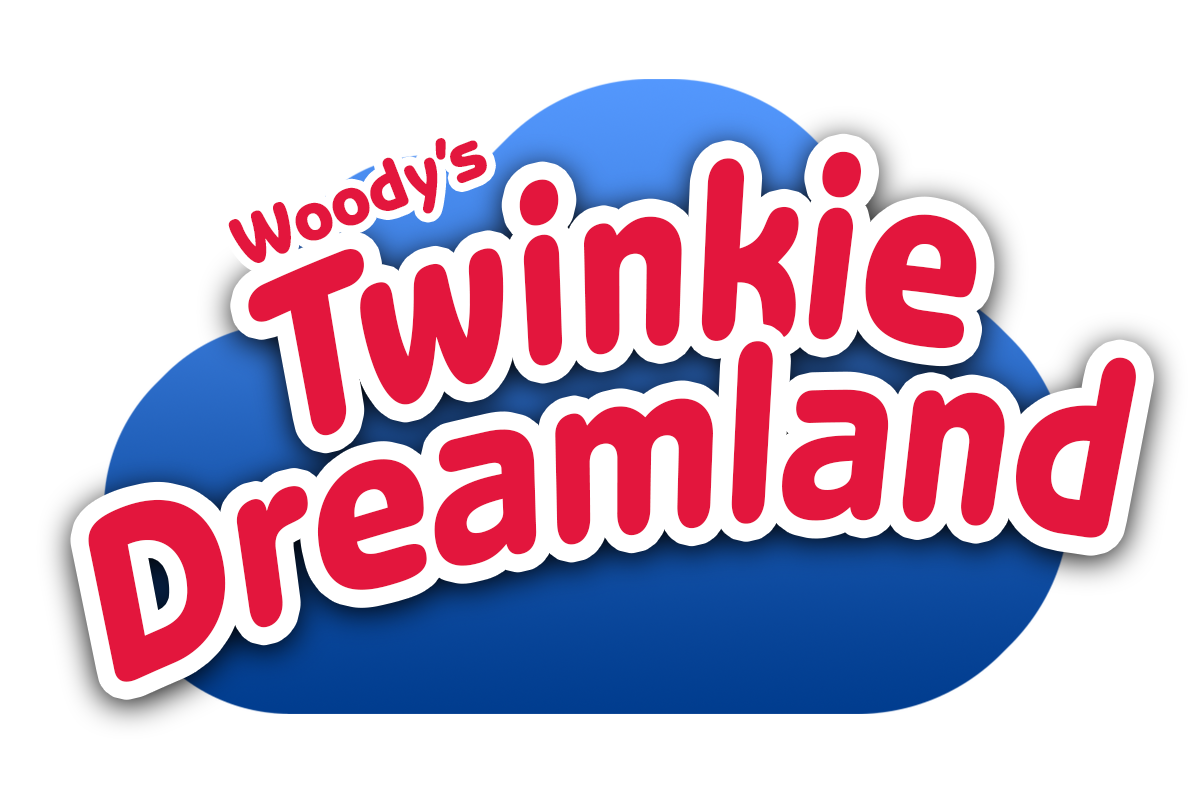
<style>
.page{position:relative;width:1200px;height:800px;background:#ffffff}
.page>*{position:absolute;margin:0}
.t1{font:72px "BenguiatGothicStd-Heavy";color:#e3163d}
.t2{font:252.2px "BenguiatGothicStd-Heavy";color:#e3163d;scale:0.8 1}
</style>
<div class="page">
<p class="t1" style="left:228px;top:138px;width:259px;height:125px;rotate:-21deg">Woody’s</p>
<p class="t2" style="left:248px;top:151px;width:729px;height:285px;rotate:-9deg">Twinkie</p>
<p class="t2" style="left:88px;top:341px;width:1048px;height:341px;rotate:-9deg">Dreamland</p>
</div>
